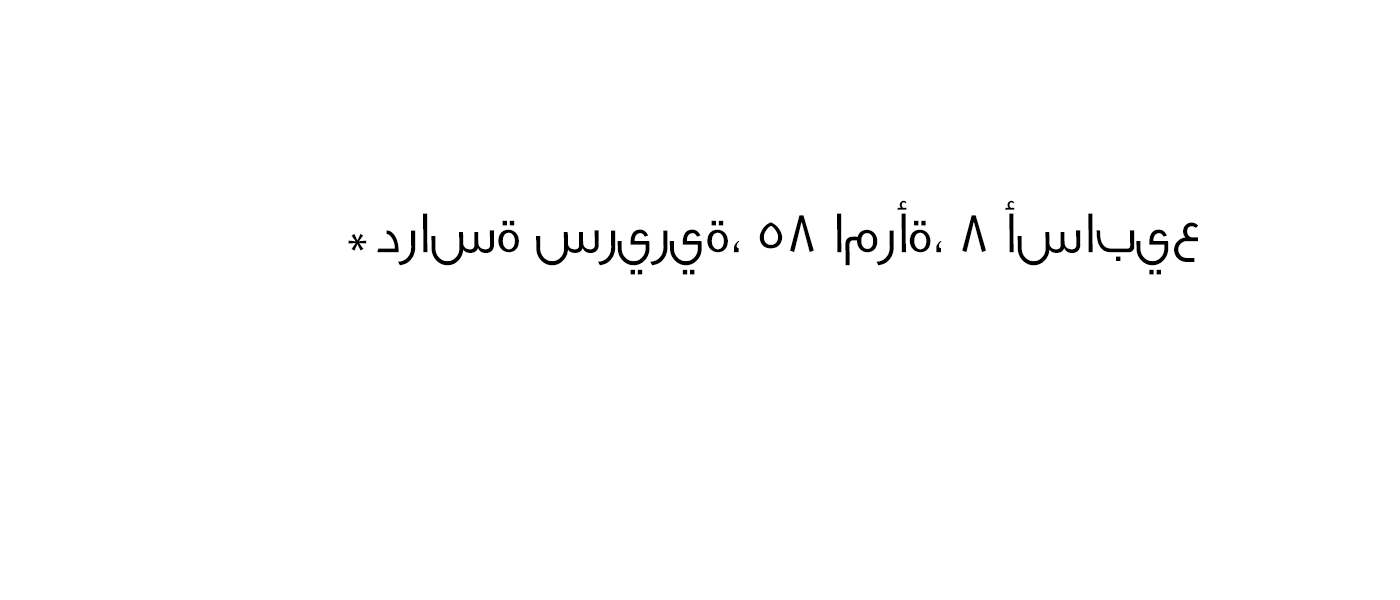
<style>
.page{position:relative;width:1400px;height:600px;background:#ffffff}
.page>*{position:absolute;margin:0}
.t1{font:60px "GESSTextLight-Light";color:#000000}
</style>
<div class="page">
<p class="t1" style="left:348px;top:200px;width:851px;height:75px">*دراسة سريرية، 58 امرأة، 8 أسابيع</p>
</div>
